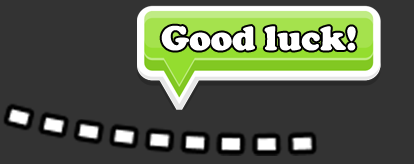
<style>
.page{position:relative;width:414px;height:164px;background:#333333}
.page>*{position:absolute;margin:0}
.t1{font:35.6px "CooperBlack";color:#ffffff}
</style>
<div class="page">
<p class="t1" style="left:161px;top:25px;width:195px;height:26px">Good luck!</p>
</div>
